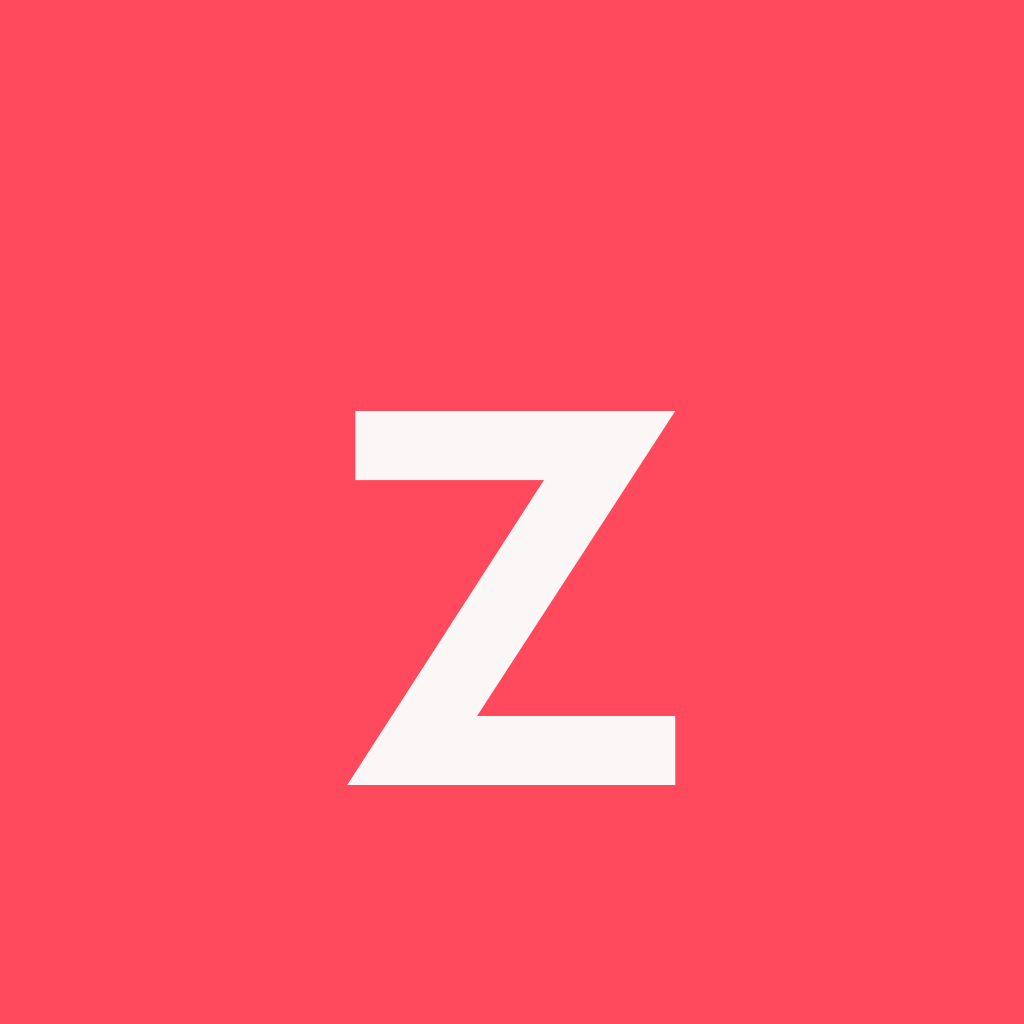
<style>
.page{position:relative;width:1024px;height:1024px;background:#ff495c}
.page>*{position:absolute;margin:0}
.t1{font:833.3px "GillSans";color:#fcf7f7}
</style>
<div class="page">
<p class="t1" style="left:347px;top:411px;width:329px;height:374px">z</p>
</div>
